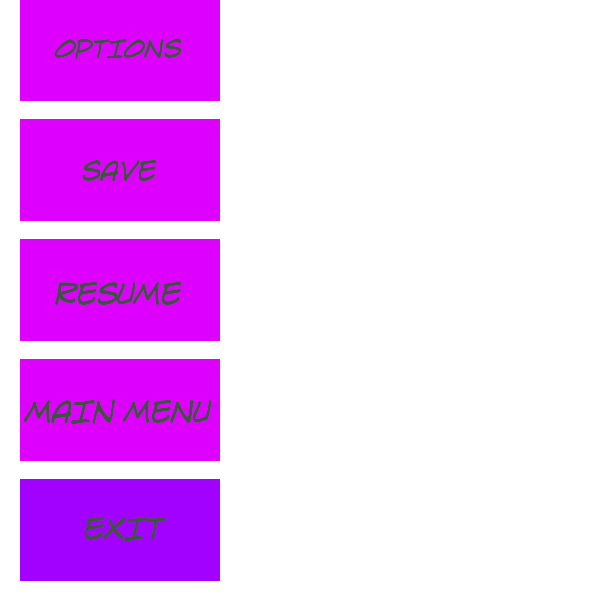
<style>
.page{position:relative;width:600px;height:600px;background:#ffffff}
.page>*{position:absolute;margin:0}
.t1{font:27.3px "LintMcCreeIntlBB-Italic";letter-spacing:-0.05em;color:#434f45}
.t2{font:29.7px "LintMcCreeIntlBB-Italic";letter-spacing:-0.05em;color:#434f45}
.t3{font:32.7px "LintMcCreeIntlBB-Italic";letter-spacing:-0.05em;color:#434f45}
</style>
<div class="page">
<p class="t1" style="left:54px;top:38px;width:127px;height:21px">OPTIONS</p>
<p class="t2" style="left:82px;top:160px;width:75px;height:21px">SAVE</p>
<p class="t3" style="left:54px;top:282px;width:128px;height:23px">RESUME</p>
<p class="t3" style="left:23px;top:399px;width:189px;height:25px">MAIn MENU</p>
<p class="t3" style="left:85px;top:517px;width:82px;height:24px">EXIT</p>
</div>
